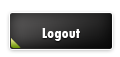
<style>
.page{position:relative;width:120px;height:57px;background:#ffffff}
.page>*{position:absolute;margin:0}
.t1{font:15.4px "TwCenMT-CondensedExtraBold";color:#ffffff}
</style>
<div class="page">
<p class="t1" style="left:42px;top:28px;width:38px;height:13px">Logout</p>
</div>
